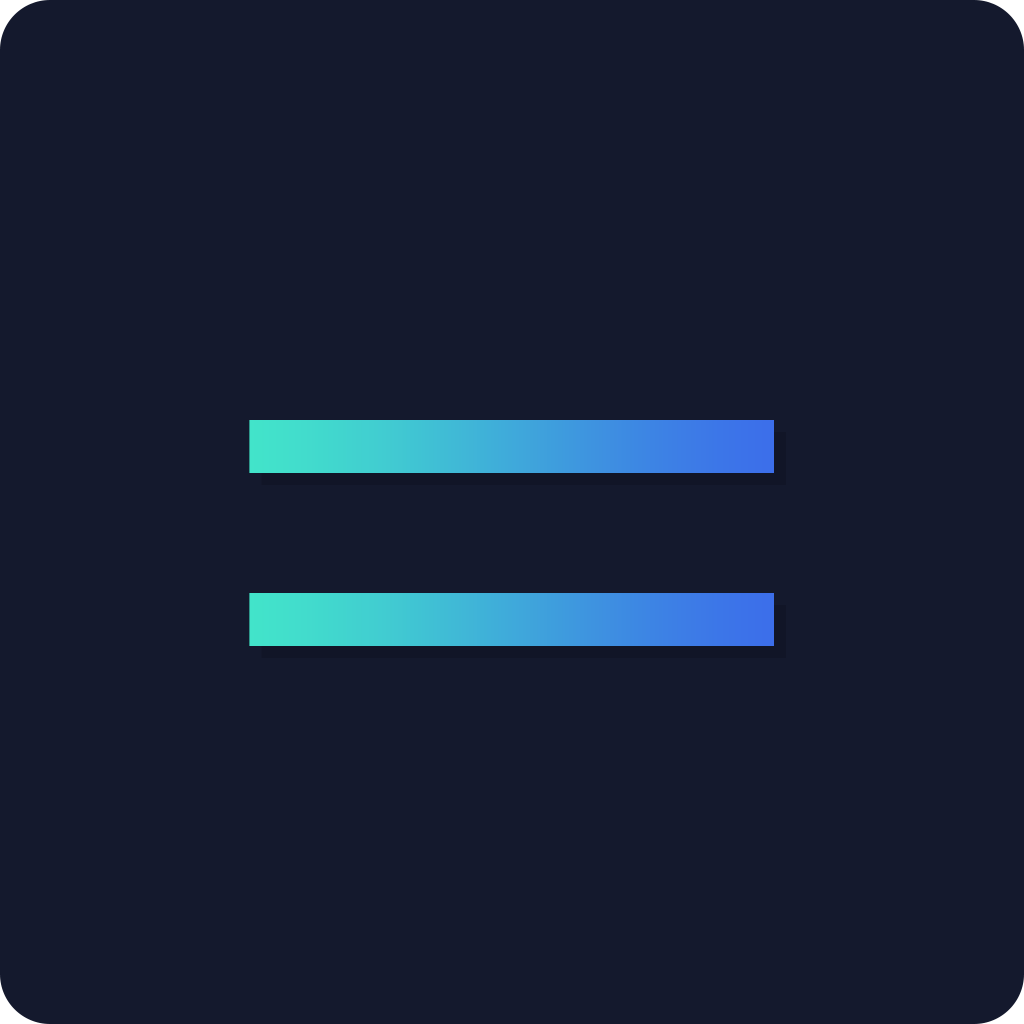
<style>
.page{position:relative;width:1024px;height:1024px;background:#14192d}
.page>*{position:absolute;margin:0}
.t1{font:883.2px "MyriadPro-Regular";scale:1.15 1}
</style>
<div class="page">
<p class="t1" style="left:249px;top:420px;width:525px;height:226px">=</p>
</div>
